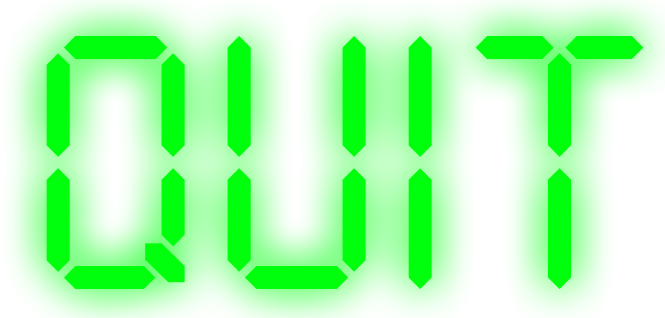
<style>
.page{position:relative;width:665px;height:318px}
.page>*{position:absolute;margin:0}
.t1{font:361.2px "SevenSegmentRegular";color:#00ff0c}
</style>
<div class="page">
<p class="t1" style="left:46px;top:36px;width:598px;height:253px">quit</p>
</div>
